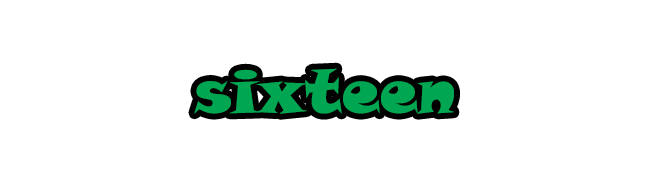
<style>
.page{position:relative;width:650px;height:191px;background:#ffffff}
.page>*{position:absolute;margin:0}
.t1{font:60px "SnapITC-Regular";color:#00a651}
</style>
<div class="page">
<p class="t1" style="left:194px;top:68px;width:260px;height:46px">sixteen</p>
</div>
